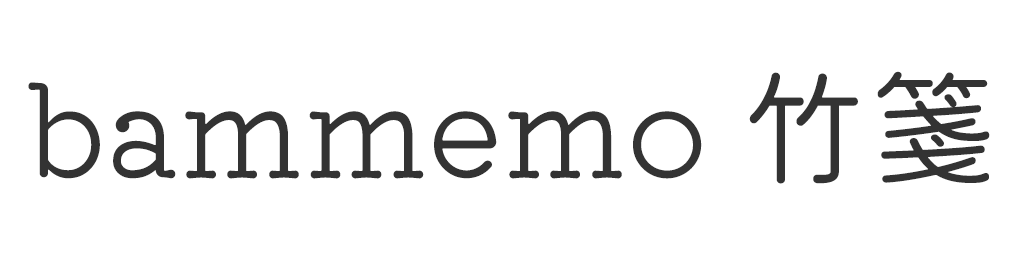
<style>
.page{position:relative;width:1024px;height:256px;background:#ffffff}
.page>*{position:absolute;margin:0}
.t1{font:129px "KiwiMaru-Light";color:#333333}
</style>
<div class="page">
<p class="t1" style="left:28px;top:71px;width:962px;height:113px">bammemo 竹箋</p>
</div>
